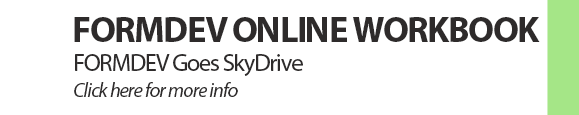
<style>
.page{position:relative;width:579px;height:115px;background:#ffffff}
.page>*{position:absolute;margin:0}
.t1{font:36px "MyriadPro-Bold";letter-spacing:-0.04em;color:#2e2b2b;text-transform:uppercase}
.t2{font:24px "MyriadPro-Regular";letter-spacing:-0.04em;color:#2e2b2b}
.t3{font:20px "MyriadPro-It";letter-spacing:-0.04em;color:#2e2b2b}
</style>
<div class="page">
<p class="t1" style="left:74px;top:17px;width:466px;height:25px">FORMDEV online workbook</p>
<p class="t2" style="left:75px;top:54px;width:228px;height:22px">FORMDEV Goes SkyDrive</p>
<p class="t3" style="left:74px;top:82px;width:164px;height:15px">Click here for more info</p>
</div>
